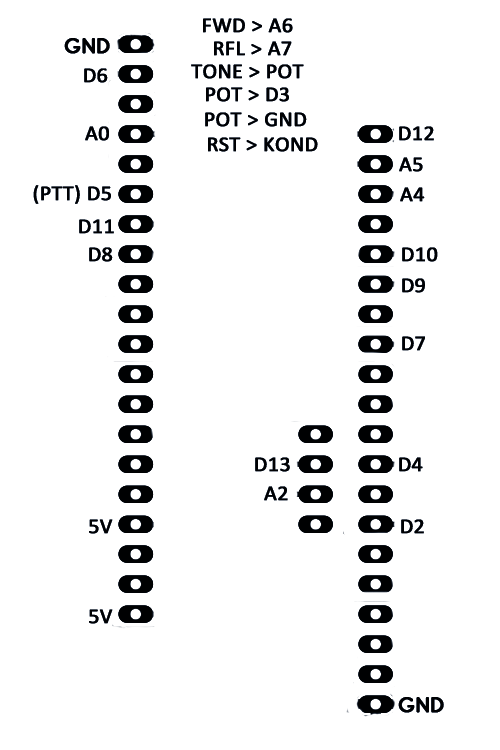
<style>
.page{position:relative;width:500px;height:750px;background:#ffffff}
.page>*{position:absolute;margin:0}
.t1{font:21.1px "Calibri";color:#010203;font-weight:bold}
.t2{font:23.8px "AntipastoPro-DemiBold";color:#010203;font-weight:bold}
</style>
<div class="page">
<p class="t1" style="left:203px;top:18px;width:90px;height:15px">FWD &gt; A6</p>
<p class="t2" style="left:64px;top:38px;width:46px;height:16px">GND</p>
<p class="t1" style="left:214px;top:41px;width:78px;height:15px">RFL &gt; A7</p>
<p class="t1" style="left:191px;top:64px;width:113px;height:15px">TONE &gt; POT</p>
<p class="t1" style="left:84px;top:68px;width:24px;height:15px">D6</p>
<p class="t1" style="left:206px;top:87px;width:83px;height:15px">POT &gt; D3</p>
<p class="t1" style="left:205px;top:112px;width:102px;height:15px">POT &gt; GND</p>
<p class="t1" style="left:85px;top:126px;width:24px;height:15px">A0</p>
<p class="t1" style="left:399px;top:126px;width:35px;height:15px">D12</p>
<p class="t1" style="left:208px;top:137px;width:110px;height:15px">RST &gt; KOND</p>
<p class="t1" style="left:399px;top:157px;width:24px;height:15px">A5</p>
<p class="t1" style="left:33px;top:185px;width:78px;height:19px">(PTT) D5</p>
<p class="t1" style="left:400px;top:187px;width:25px;height:15px">A4</p>
<p class="t1" style="left:79px;top:219px;width:35px;height:15px">D11</p>
<p class="t1" style="left:89px;top:247px;width:24px;height:15px">D8</p>
<p class="t1" style="left:402px;top:247px;width:36px;height:15px">D10</p>
<p class="t1" style="left:402px;top:278px;width:23px;height:15px">D9</p>
<p class="t1" style="left:402px;top:336px;width:23px;height:15px">D7</p>
<p class="t1" style="left:255px;top:457px;width:35px;height:15px">D13</p>
<p class="t1" style="left:399px;top:457px;width:24px;height:15px">D4</p>
<p class="t1" style="left:264px;top:486px;width:24px;height:15px">A2</p>
<p class="t1" style="left:89px;top:519px;width:24px;height:15px">5V</p>
<p class="t1" style="left:401px;top:519px;width:23px;height:15px">D2</p>
<p class="t1" style="left:89px;top:609px;width:24px;height:15px">5V</p>
<p class="t2" style="left:398px;top:697px;width:46px;height:16px">GND</p>
</div>
